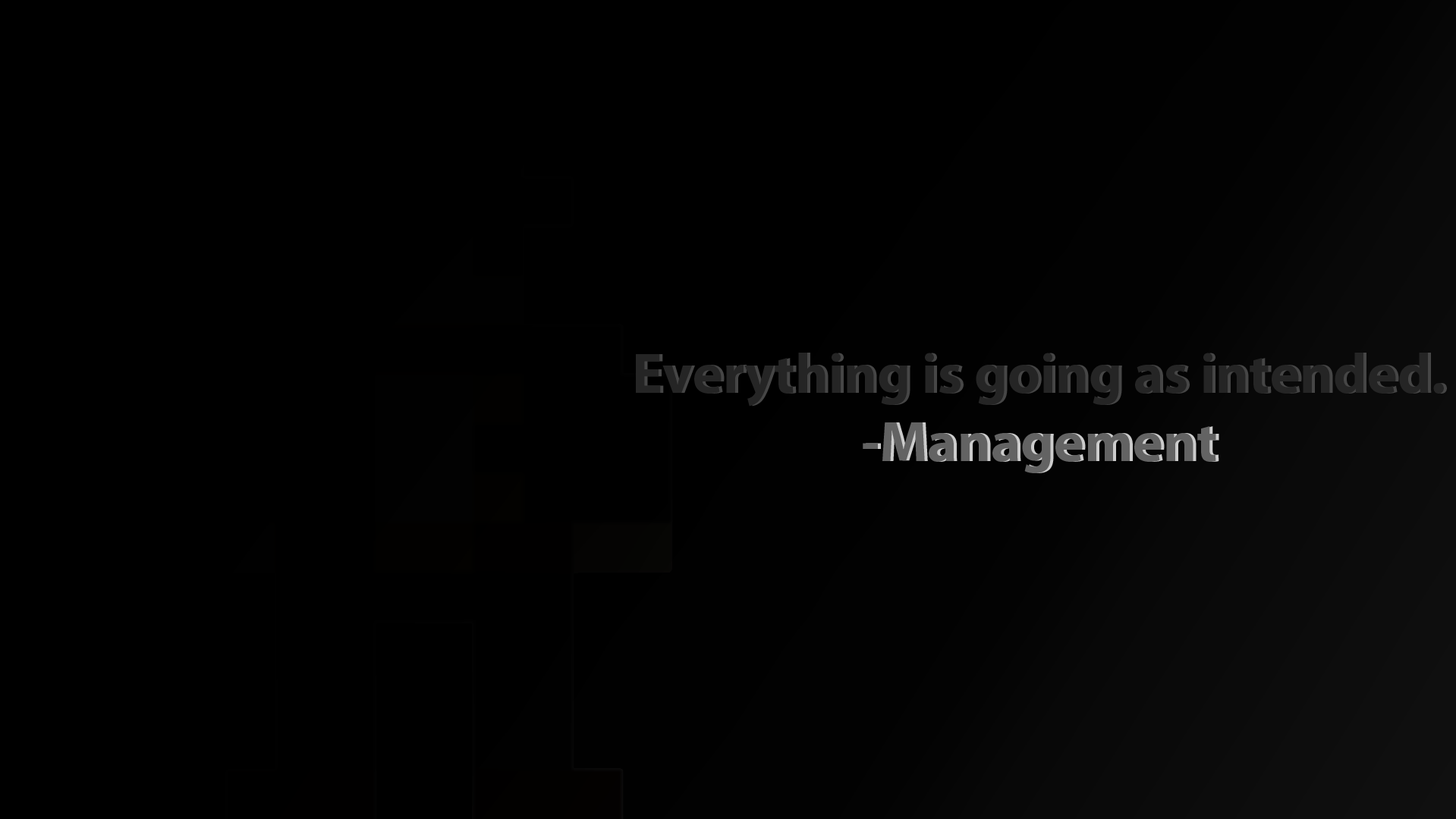
<style>
.page{position:relative;width:1456px;height:819px;background:#000000}
.page>*{position:absolute;margin:0}
.t1{font:56.9px "MyriadPro-Bold";color:#252525}
.t2{font:56.9px "MyriadPro-Bold";color:#636363}
.t3{font:56.9px "MyriadPro-Bold"}
</style>
<div class="page">
<p class="t1" style="left:636px;top:353px;width:807px;height:120px;text-align:center">Everything is going as intended.<br><span class="t2">-Management</span></p>
<p class="t3" style="left:639px;top:353px;width:807px;height:120px;text-align:center">Everything is going as intended.<br>-Management</p>
</div>
